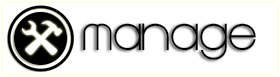
<style>
.page{position:relative;width:280px;height:77px;background:#ffffff}
.page>*{position:absolute;margin:0}
.t1{font:42.7px "Steiner";color:#000000}
</style>
<div class="page">
<p class="t1" style="left:83px;top:23px;width:173px;height:37px">manage</p>
</div>
